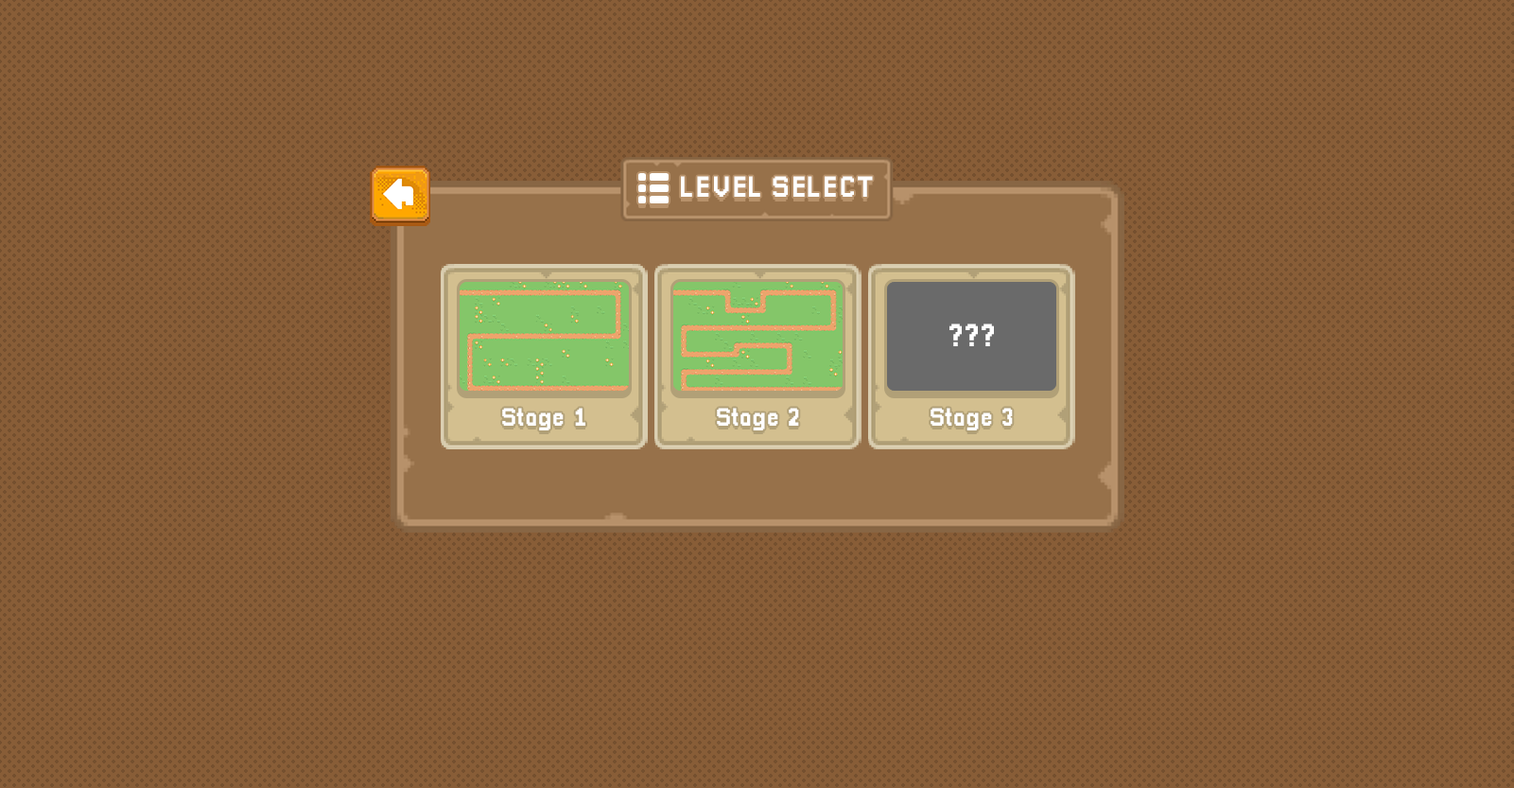
<style>
.page{position:relative;width:1514px;height:788px;background:#885d37}
.page>*{position:absolute;margin:0}
.t1{font:29.5px "Pixellari";color:#ffffff}
.t2{font:32.1px "Pixellari";color:#ffffff}
.t3{font:25.6px "Pixellari";color:#ffffff}
</style>
<div class="page">
<p class="t1" style="left:681px;top:176px;width:192px;height:21px">LEVEL SELECT</p>
<p class="t2" style="left:949px;top:323px;width:45px;height:23px">???</p>
<p class="t3" style="left:502px;top:408px;width:83px;height:22px">Stage 1</p>
<p class="t3" style="left:717px;top:408px;width:82px;height:22px">Stage 2</p>
<p class="t3" style="left:930px;top:408px;width:83px;height:22px">Stage 3</p>
</div>
